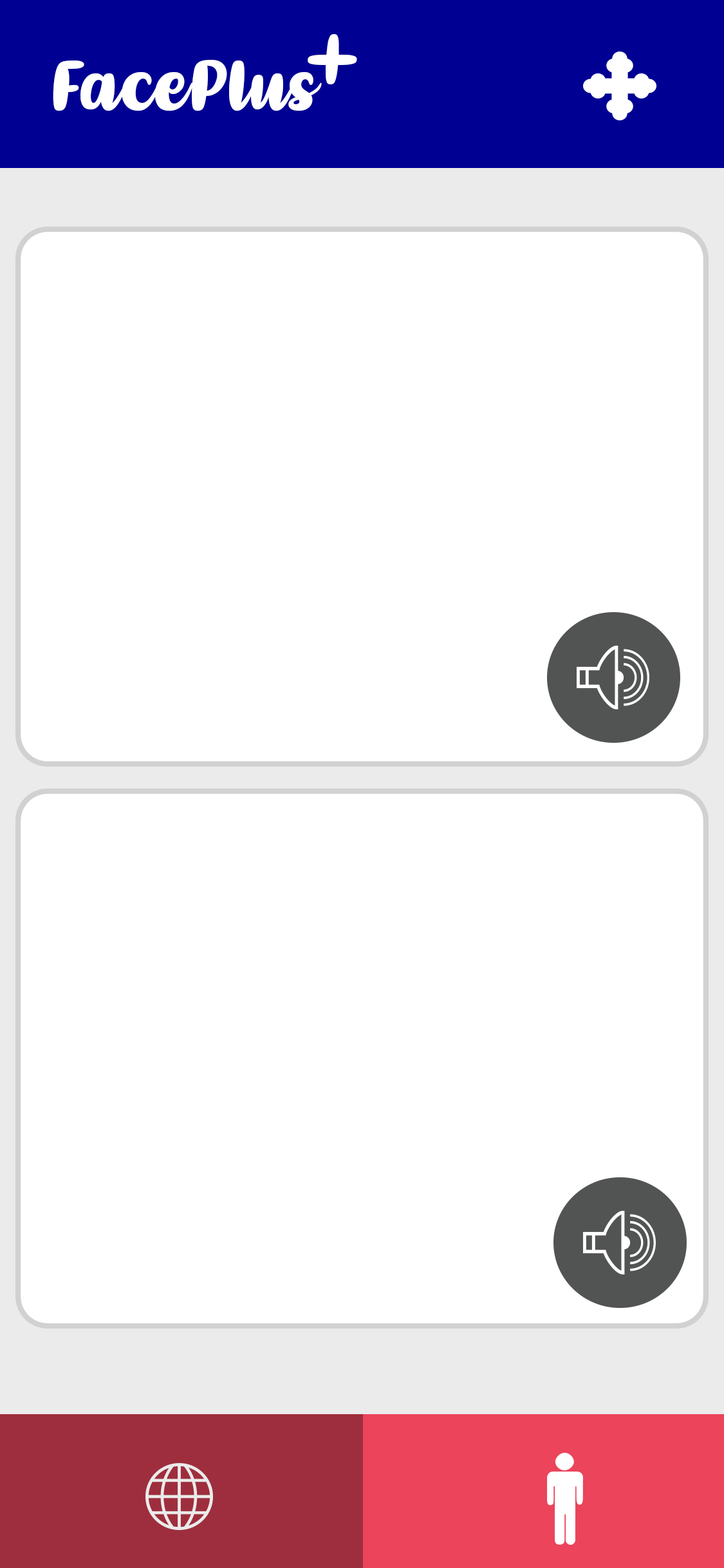
<style>
.page{position:relative;width:724px;height:1568px;background:#ffffff}
.page>*{position:absolute;margin:0}
.t1{font:103px "Kathen";color:#ffffff}
.t2{font:65px "Kathen";color:#ffffff}
</style>
<div class="page">
<p class="t1" style="left:308px;top:34px;width:49px;height:50px">+</p>
<p class="t2" style="left:53px;top:60px;width:269px;height:51px">FacePlus</p>
</div>
